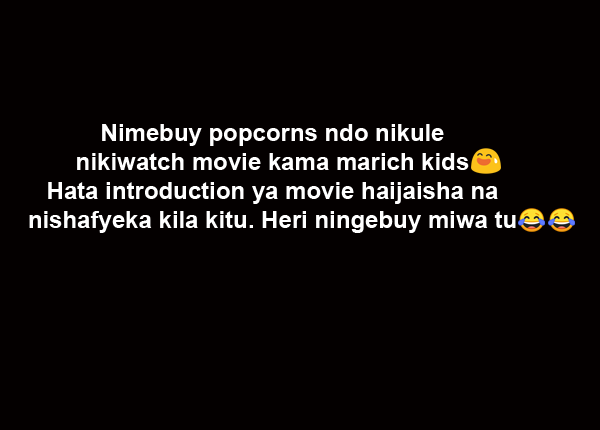
<style>
.page{position:relative;width:600px;height:430px;background:#040000}
.page>*{position:absolute;margin:0}
.t1{font:24px "Arial-BoldMT";color:#ffffff}
</style>
<div class="page">
<p class="t1" style="left:29px;top:124px;width:487px;height:109px;text-align:center">Nimebuy popcorns ndo nikule <br>nikiwatch movie kama marich kids <br>Hata introduction ya movie haijaisha na <br>nishafyeka kila kitu. Heri ningebuy miwa tu</p>
</div>
